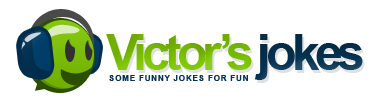
<style>
.page{position:relative;width:377px;height:107px;background:#ffffff}
.page>*{position:absolute;margin:0}
.t1{font:50px "Arial-BoldMT";letter-spacing:-0.1em;color:#7dc400}
.t2{font:50px "Arial-BoldMT";letter-spacing:-0.1em;color:#043252}
.t3{font:8.3px "Arial-BoldMT";letter-spacing:0.075em;color:#043252}
</style>
<div class="page">
<p class="t1" style="left:106px;top:34px;width:257px;height:46px">Victor’s<span class="t2"> jokes</span></p>
<p class="t3" style="left:109px;top:75px;width:139px;height:6px">SOME FUNNY JOKES FOR FUN</p>
</div>
